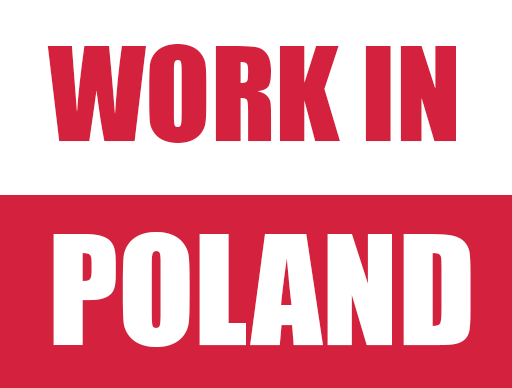
<style>
.page{position:relative;width:512px;height:388px;background:#ffffff}
.page>*{position:absolute;margin:0}
.t1{font:120px "Impact";color:#d4213d}
.t2{font:140px "Impact";color:#ffffff}
</style>
<div class="page">
<p class="t1" style="left:47px;top:44px;width:409px;height:99px">WORK IN</p>
<p class="t2" style="left:53px;top:232px;width:418px;height:115px">POLAND</p>
</div>
